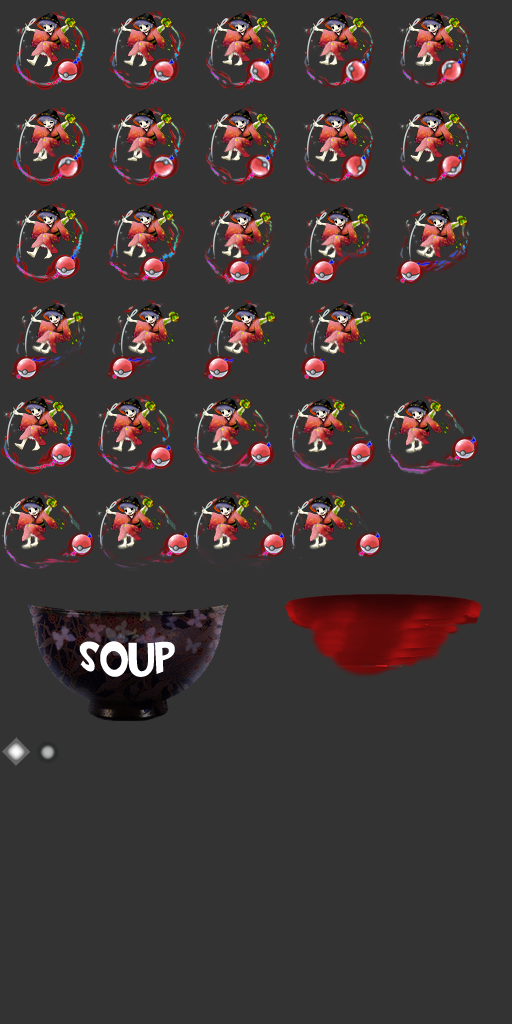
<style>
.page{position:relative;width:512px;height:1024px;background:#333333}
.page>*{position:absolute;margin:0}
.t1{font:36px "TF2Build";letter-spacing:-0.01em;color:#ffffff}
</style>
<div class="page">
<p class="t1" style="left:79px;top:641px;width:96px;height:36px">SOUP</p>
</div>
